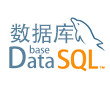
<style>
.page{position:relative;width:110px;height:90px;background:#ffffff}
.page>*{position:absolute;margin:0}
.t1{font:22px "AdobeHeitiStd-Regular";letter-spacing:-0.005em;color:#57829e}
.t2{font:20px "AdobeHeitiStd-Regular";letter-spacing:-0.005em;color:#57829e}
.t3{font:28px "AdobeHeitiStd-Regular";letter-spacing:-0.005em;color:#57829e}
.t4{font:10px "AdobeHeitiStd-Regular";letter-spacing:-0.005em;color:#57829e}
</style>
<div class="page">
<p class="t1" style="left:10px;top:23px;width:64px;height:21px">数据库</p>
<p class="t2" style="left:9px;top:46px;width:45px;height:23px"><span class="t3">D</span>ata</p>
<p class="t4" style="left:29px;top:45px;width:21px;height:9px">base</p>
</div>
